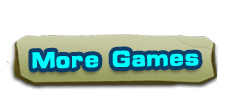
<style>
.page{position:relative;width:232px;height:106px;background:#ffffff}
.page>*{position:absolute;margin:0}
.t1{font:24px "HYk2gj";color:#00ffff}
</style>
<div class="page">
<p class="t1" style="left:32px;top:50px;width:167px;height:19px;rotate:-1deg">More Games</p>
</div>
